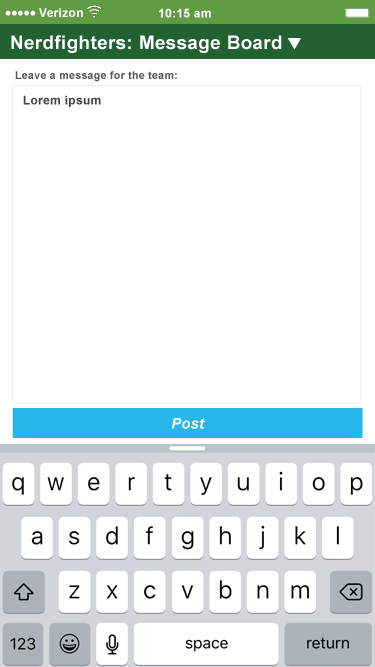
<style>
.page{position:relative;width:375px;height:667px;background:#ffffff}
.page>*{position:absolute;margin:0}
.t1{font:12px "Arial-BoldMT";letter-spacing:0.025em;color:#ffffff}
.t2{font:18.7px "Arial-BoldMT";letter-spacing:0.025em;color:#ffffff}
.t3{font:10.7px "Arial-BoldMT";letter-spacing:0.025em;color:#565656}
.t4{font:12px "Arial-BoldMT";letter-spacing:0.025em;color:#444444}
.t5{font:14.7px "Arial-BoldItalicMT";letter-spacing:0.025em;color:#ffffff}
</style>
<div class="page">
<p class="t1" style="left:39px;top:8px;width:44px;height:9px">Verizon</p>
<p class="t1" style="left:159px;top:8px;width:52px;height:10px">10:15 am</p>
<p class="t2" style="left:11px;top:35px;width:271px;height:18px">Nerdfighters: Message Board</p>
<p class="t3" style="left:15px;top:71px;width:162px;height:11px">Leave a message for the team:</p>
<p class="t4" style="left:23px;top:95px;width:78px;height:12px">Lorem ipsum</p>
<p class="t5" style="left:171px;top:418px;width:34px;height:11px">Post</p>
</div>
